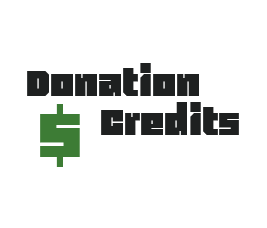
<style>
.page{position:relative;width:267px;height:228px;background:#ffffff}
.page>*{position:absolute;margin:0}
.t1{font:36px "Blackentina4F";color:#1e2020}
.t2{font:72px "Blackentina4F";color:#3d7c35}
</style>
<div class="page">
<p class="t1" style="left:27px;top:63px;width:172px;height:33px">Donation</p>
<p class="t1" style="left:101px;top:102px;width:138px;height:33px">Credits</p>
<p class="t2" style="left:40px;top:104px;width:40px;height:63px">$</p>
</div>
